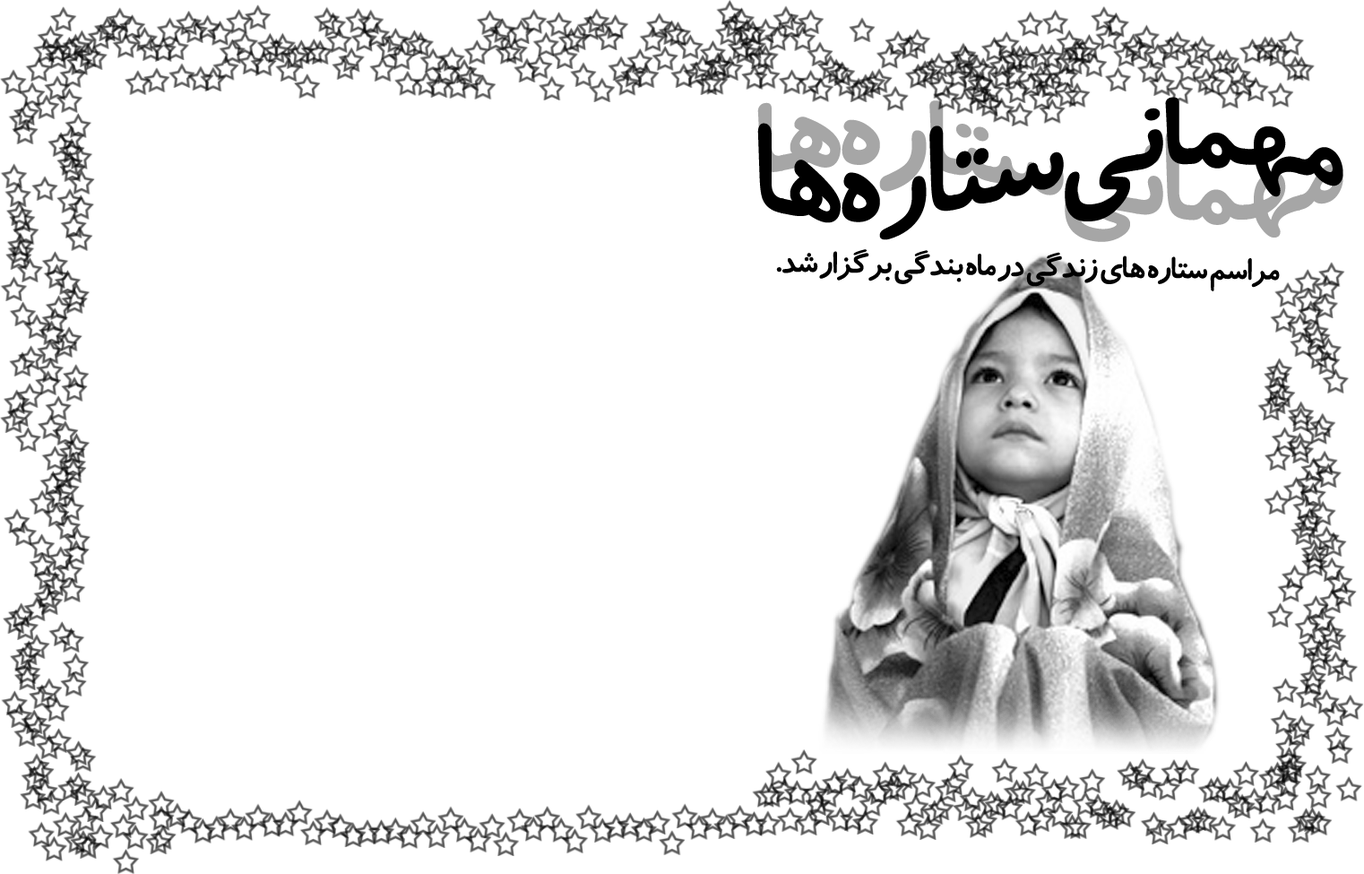
<style>
.page{position:relative;width:1364px;height:874px;background:#ffffff}
.page>*{position:absolute;margin:0}
.t1{font:130.7px "BKoodakBold";letter-spacing:-0.05em;color:#000000}
.t2{font:34.9px "BKoodakBold";letter-spacing:-0.05em;color:#000000}
</style>
<div class="page">
<p class="t1" style="left:757px;top:97px;width:587px;height:143px">مهماني ستاره ها</p>
<p class="t2" style="left:776px;top:249px;width:504px;height:42px;rotate:1deg">مراسم ستاره هاي زندگي در ماه بندگي برگزار شد.</p>
</div>
